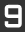
<style>
.page{position:relative;width:25px;height:32px;background:#333333}
.page>*{position:absolute;margin:0}
.t1{font:32px "Aldrich";color:#fefefe}
</style>
<div class="page">
<p class="t1" style="left:4px;top:4px;width:18px;height:24px">9</p>
</div>
